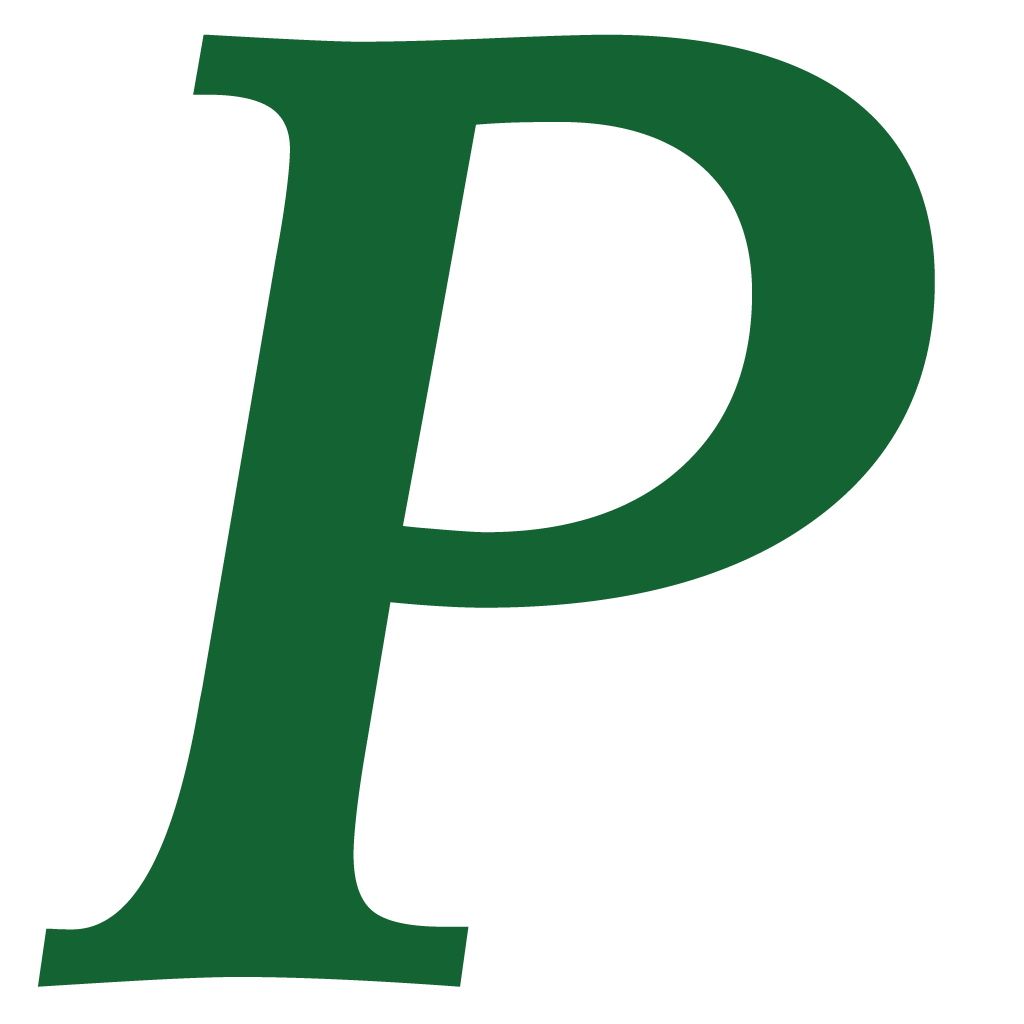
<style>
.page{position:relative;width:1024px;height:1024px;background:#ffffff}
.page>*{position:absolute;margin:0}
.t1{font:1424.8px "IowanOldStyle-BoldItalic";letter-spacing:0.025em;color:#136333}
</style>
<div class="page">
<p class="t1" style="left:38px;top:34px;width:897px;height:953px">P</p>
</div>
